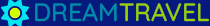
<style>
.page{position:relative;width:210px;height:26px;background:#06197c}
.page>*{position:absolute;margin:0}
.t1{font:25px "Quicksand-Medium";color:#9bd100}
.t2{font:75px "GillSansMT";color:#000000}
.t3{font:25px "Quicksand-Medium";color:#008cab}
</style>
<div class="page">
<p class="t1" style="left:35px;top:3px;width:174px;height:19px"><span class="t2">  </span><span class="t3">DREAM</span>TRAVEL</p>
</div>
